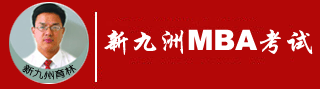
<style>
.page{position:relative;width:320px;height:89px;background:#b30707}
.page>*{position:absolute;margin:0}
.t1{font:28px "STXingkai";color:#ffffff}
.t2{font:28px "Arial-Black";color:#ffffff}
</style>
<div class="page">
<p class="t1" style="left:104px;top:29px;width:209px;height:26px">新九洲<span class="t2">MBA</span>考试</p>
</div>
